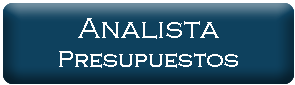
<style>
.page{position:relative;width:295px;height:85px;background:#0e415e}
.page>*{position:absolute;margin:0}
.t1{font:24px "CopperplateGothic-Light";color:#ffffff}
.t2{font:30px "CopperplateGothic-Light";color:#ffffff}
</style>
<div class="page">
<p class="t1" style="left:59px;top:18px;width:179px;height:50px;text-align:center"><span class="t2">Analista<br></span>Presupuestos</p>
</div>
